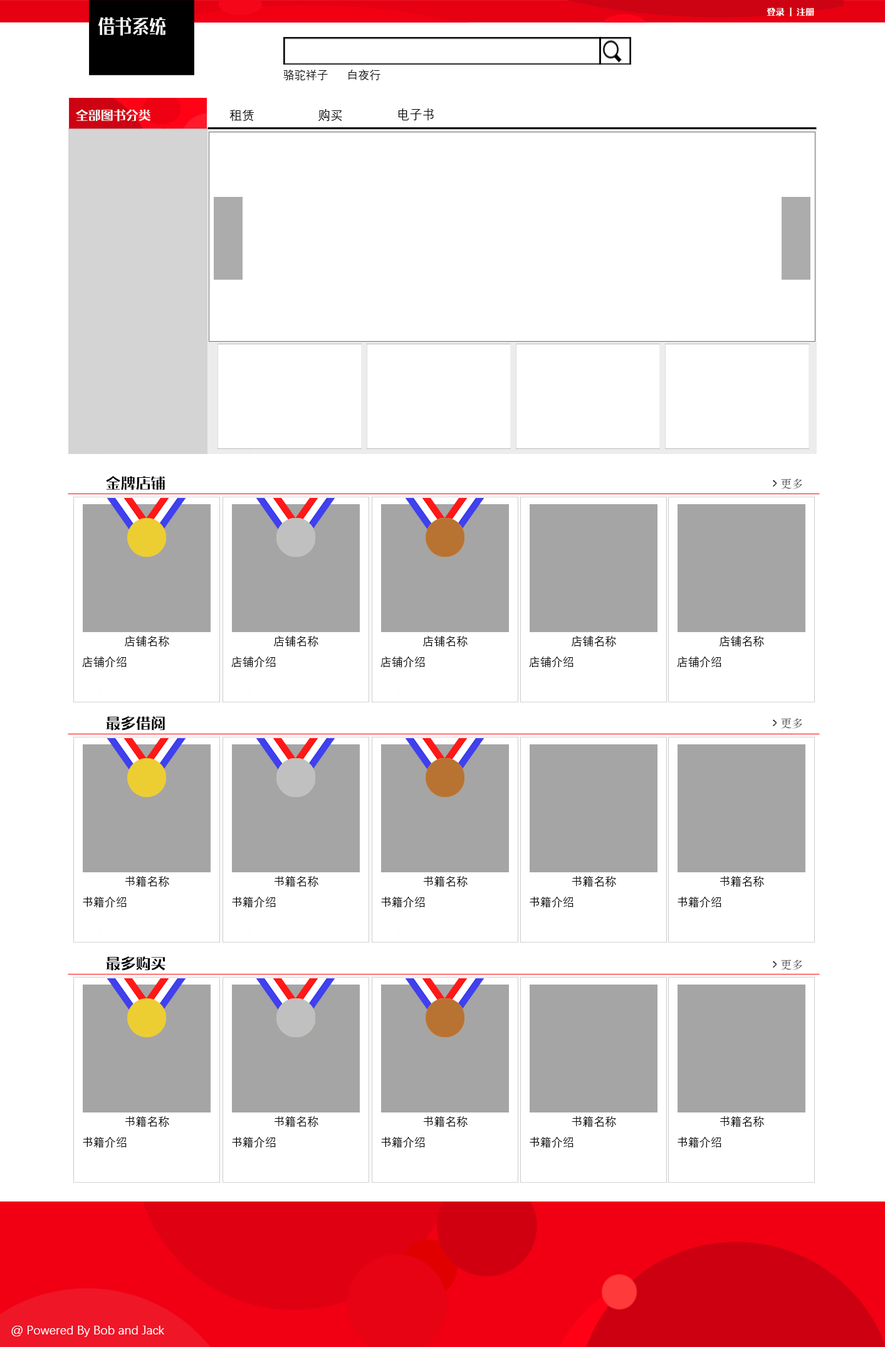
<style>
.page{position:relative;width:885px;height:1347px;background:#ffffff}
.page>*{position:absolute;margin:0}
.t1{font:19.5px "Benmo-Chenhei";color:#ffffff;scale:0.88 1}
.t2{font:8.8px "Benmo-Chenhei";color:#ffffff}
.t3{font:11.3px "DengXian-Regular";color:#000000}
.t4{font:12.5px "Benmo-Chenhei";color:#ffffff}
.t5{font:12.5px "DengXian-Regular";color:#010101}
.t6{font:12.5px "DengXian-Regular";color:#000000}
.t7{font:15px "Benmo-Chenhei";color:#000000}
.t8{font:11.3px "Fixedsys";color:#000000}
.t9{font:12.5px "DengXian-Regular";color:#ffffff}
</style>
<div class="page">
<p class="t1" style="left:98px;top:17px;width:68px;height:19px">借书系统</p>
<p class="t2" style="left:767px;top:8px;width:48px;height:8px">登录  |  注册</p>
<p class="t3" style="left:283px;top:70px;width:98px;height:10px">骆驼祥子      白夜行</p>
<p class="t4" style="left:76px;top:109px;width:74px;height:13px">全部图书分类</p>
<p class="t5" style="left:229px;top:110px;width:25px;height:11px">租赁</p>
<p class="t6" style="left:318px;top:109px;width:24px;height:12px">购买</p>
<p class="t6" style="left:398px;top:108px;width:36px;height:12px">电子书</p>
<p class="t7" style="left:106px;top:476px;width:60px;height:14px">金牌店铺</p>
<p class="t8" style="left:773px;top:478px;width:30px;height:11px">&gt;更多</p>
<p class="t3" style="left:124px;top:636px;width:45px;height:10px">店铺名称</p>
<p class="t3" style="left:273px;top:636px;width:46px;height:10px">店铺名称</p>
<p class="t3" style="left:423px;top:636px;width:45px;height:10px">店铺名称</p>
<p class="t3" style="left:571px;top:636px;width:45px;height:10px">店铺名称</p>
<p class="t3" style="left:719px;top:636px;width:45px;height:10px">店铺名称</p>
<p class="t3" style="left:82px;top:656px;width:45px;height:11px">店铺介绍</p>
<p class="t3" style="left:231px;top:656px;width:45px;height:11px">店铺介绍</p>
<p class="t3" style="left:381px;top:656px;width:44px;height:11px">店铺介绍</p>
<p class="t3" style="left:529px;top:656px;width:45px;height:11px">店铺介绍</p>
<p class="t3" style="left:677px;top:656px;width:45px;height:11px">店铺介绍</p>
<p class="t7" style="left:106px;top:716px;width:59px;height:14px">最多借阅</p>
<p class="t8" style="left:773px;top:718px;width:30px;height:11px">&gt;更多</p>
<p class="t3" style="left:125px;top:875px;width:44px;height:12px">书籍名称</p>
<p class="t3" style="left:274px;top:875px;width:45px;height:12px">书籍名称</p>
<p class="t3" style="left:423px;top:875px;width:45px;height:12px">书籍名称</p>
<p class="t3" style="left:572px;top:875px;width:44px;height:12px">书籍名称</p>
<p class="t3" style="left:720px;top:875px;width:44px;height:12px">书籍名称</p>
<p class="t3" style="left:83px;top:896px;width:44px;height:12px">书籍介绍</p>
<p class="t3" style="left:232px;top:896px;width:44px;height:12px">书籍介绍</p>
<p class="t3" style="left:381px;top:896px;width:44px;height:12px">书籍介绍</p>
<p class="t3" style="left:530px;top:896px;width:44px;height:12px">书籍介绍</p>
<p class="t3" style="left:678px;top:896px;width:44px;height:12px">书籍介绍</p>
<p class="t7" style="left:106px;top:956px;width:60px;height:15px">最多购买</p>
<p class="t8" style="left:773px;top:959px;width:30px;height:11px">&gt;更多</p>
<p class="t3" style="left:125px;top:1115px;width:44px;height:12px">书籍名称</p>
<p class="t3" style="left:274px;top:1115px;width:45px;height:12px">书籍名称</p>
<p class="t3" style="left:423px;top:1115px;width:45px;height:12px">书籍名称</p>
<p class="t3" style="left:572px;top:1115px;width:44px;height:12px">书籍名称</p>
<p class="t3" style="left:720px;top:1115px;width:44px;height:12px">书籍名称</p>
<p class="t3" style="left:83px;top:1136px;width:44px;height:12px">书籍介绍</p>
<p class="t3" style="left:232px;top:1136px;width:44px;height:12px">书籍介绍</p>
<p class="t3" style="left:381px;top:1136px;width:44px;height:12px">书籍介绍</p>
<p class="t3" style="left:530px;top:1136px;width:44px;height:12px">书籍介绍</p>
<p class="t3" style="left:678px;top:1136px;width:44px;height:12px">书籍介绍</p>
<p class="t9" style="left:11px;top:1326px;width:153px;height:11px">@ Powered By Bob and Jack</p>
</div>
